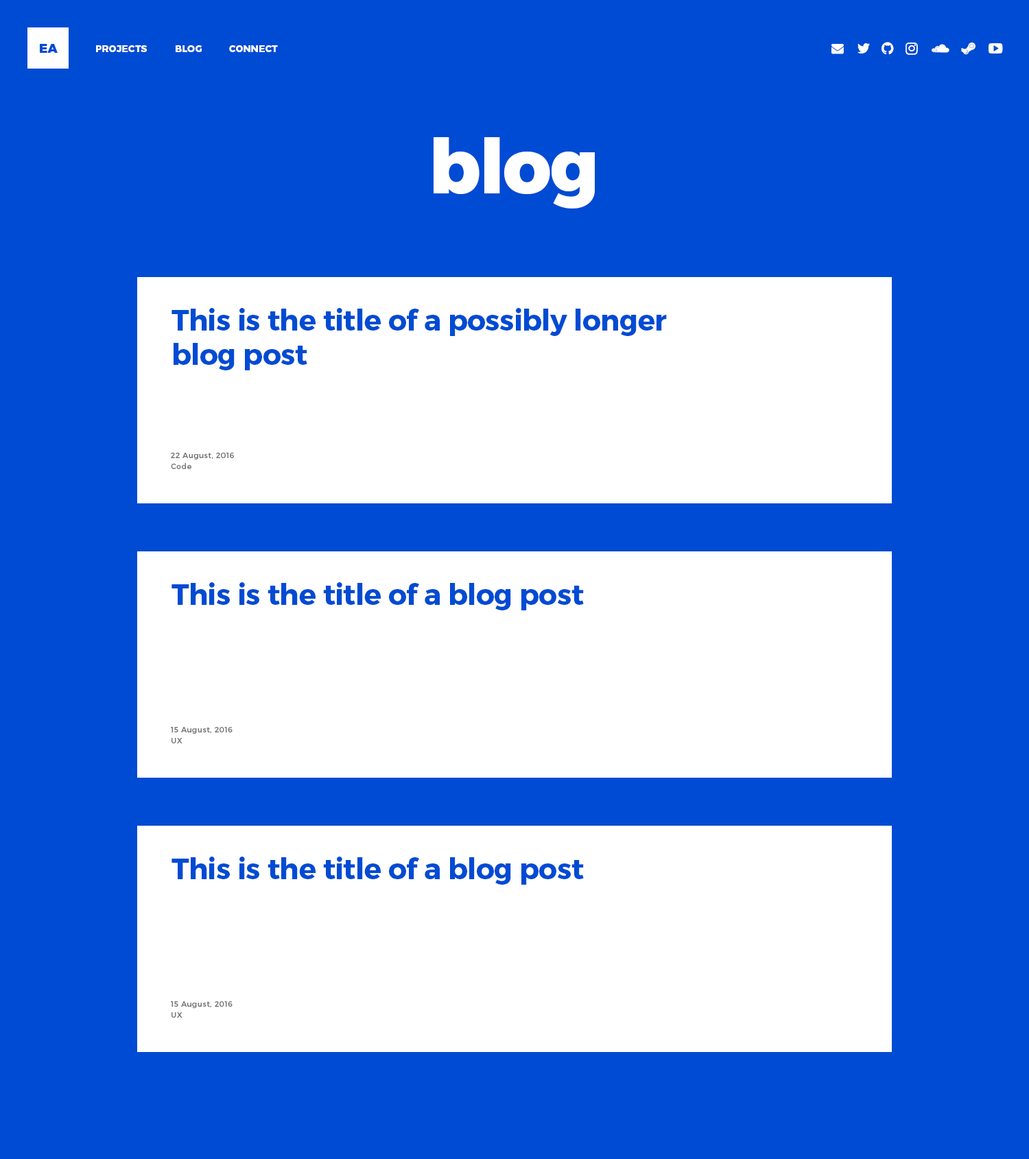
<style>
.page{position:relative;width:1029px;height:1159px;background:#004bd3}
.page>*{position:absolute;margin:0}
.t1{font:12.3px "Montserrat-Black";color:#004bd3}
.t2{font:9.6px "Montserrat-ExtraBold";color:#ffffff}
.t3{font:75.4px "Montserrat-ExtraBold";color:#ffffff}
.t4{font:28.8px "Montserrat-Bold";color:#004bd3}
.t5{font:7.5px/11px "Montserrat-Regular";letter-spacing:0.05em;color:#5c5c5c}
</style>
<div class="page">
<p class="t1" style="left:40px;top:44px;width:18px;height:9px">EA</p>
<p class="t2" style="left:96px;top:45px;width:51px;height:7px">PROJECTS</p>
<p class="t2" style="left:176px;top:45px;width:26px;height:7px">BLOG</p>
<p class="t2" style="left:229px;top:45px;width:49px;height:7px">CONNECT</p>
<p class="t3" style="left:433px;top:137px;width:162px;height:71px">blog</p>
<p class="t4" style="left:171px;top:308px;width:496px;height:62px">This is the title of a possibly longer<br>blog post</p>
<p class="t5" style="left:171px;top:453px;width:63px;height:16px;opacity:0.9">22 August, 2016<br>Code</p>
<p class="t4" style="left:171px;top:582px;width:413px;height:28px">This is the title of a blog post</p>
<p class="t5" style="left:171px;top:727px;width:62px;height:16px;opacity:0.9">15 August, 2016<br>UX</p>
<p class="t4" style="left:171px;top:857px;width:413px;height:28px">This is the title of a blog post</p>
<p class="t5" style="left:171px;top:1001px;width:62px;height:17px;opacity:0.9">15 August, 2016<br>UX</p>
</div>
